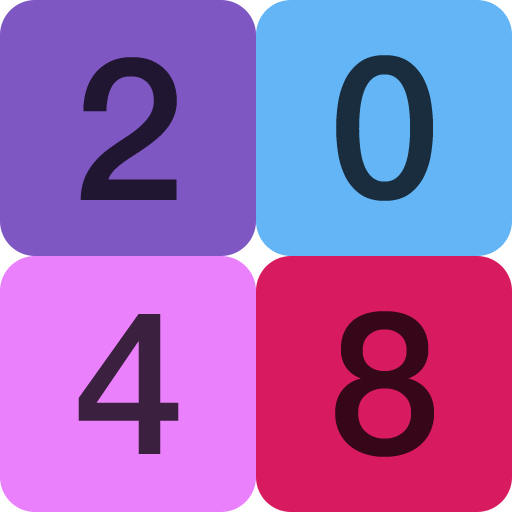
<style>
.page{position:relative;width:512px;height:512px;background:#ea80fc}
.page>*{position:absolute;margin:0}
.t1{font:200px "HelveticaNeueLTCom-Md";letter-spacing:-0.1em;color:#201631}
.t2{font:200px "HelveticaNeueLTCom-Md";letter-spacing:-0.1em;color:#192d3e}
.t3{font:200px "HelveticaNeueLTCom-Md";letter-spacing:-0.1em;color:#3b203f}
.t4{font:200px "HelveticaNeueLTCom-Md";letter-spacing:-0.1em;color:#360718}
</style>
<div class="page">
<p class="t1" style="left:80px;top:57px;width:97px;height:143px">2</p>
<p class="t2" style="left:336px;top:55px;width:97px;height:146px">0</p>
<p class="t3" style="left:78px;top:314px;width:101px;height:140px">4</p>
<p class="t4" style="left:335px;top:311px;width:99px;height:146px">8</p>
</div>
